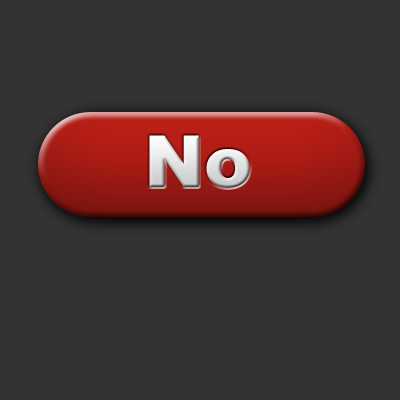
<style>
.page{position:relative;width:400px;height:400px;background:#333333}
.page>*{position:absolute;margin:0}
.t1{font:72px "Arial-Black"}
</style>
<div class="page">
<p class="t1" style="left:149px;top:135px;width:101px;height:53px">No</p>
</div>
